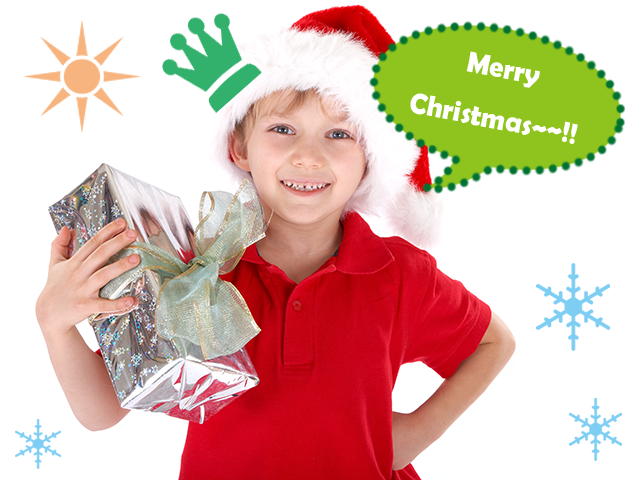
<style>
.page{position:relative;width:640px;height:480px;background:#ffffff}
.page>*{position:absolute;margin:0}
.t1{font:29.3px "BerlinSansFBDemi-Bold";color:#ffffff;scale:0.96 1}
</style>
<div class="page">
<p class="t1" style="left:410px;top:51px;width:168px;height:93px;text-align:center;rotate:11deg">Merry<br>Christmas~~!!</p>
</div>
